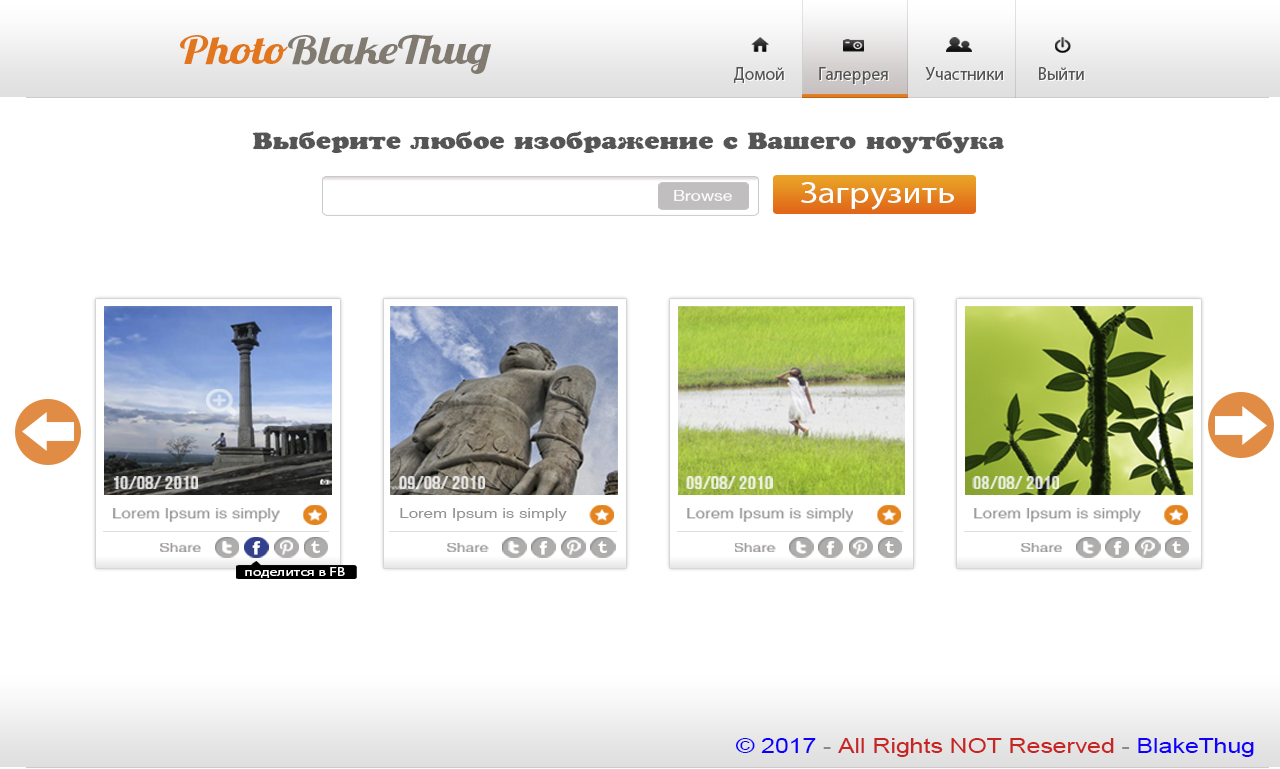
<style>
.page{position:relative;width:1280px;height:769px;background:#ffffff}
.page>*{position:absolute;margin:0}
.t1{font:39.2px "Lobster1.4";color:#817a71;scale:1.21 1}
.t2{font:39.2px "Lobster1.4";color:#e2761c;scale:1.21 1}
.t3{font:18.4px "MyriadPro-Regular";color:#545454;scale:0.95 1}
.t4{font:23.3px "a_CooperBlackRg";color:#565555;scale:1.17 1}
.t5{font:30.6px "MyriadPro-Regular";color:#ffffff;scale:1.17 1}
.t6{font:15px "HelveticaNeueLT-Roman";color:#ffffff;scale:1.17 1}
.t7{font:18.3px "BebasNeue";color:#e0e0df;scale:1.17 1}
.t8{font:18.3px "BebasNeue";color:#e7e6e5;scale:1.17 1}
.t9{font:18.3px "BebasNeue";color:#edf1e0;scale:1.17 1}
.t10{font:18.3px "BebasNeue";color:#eaefdf;scale:1.17 1}
.t11{font:14.4px "HelveticaCE-Regular";color:#979393;scale:1.17 1}
.t12{font:14.4px "HelveticaCE-Regular";color:#959292;scale:1.17 1}
.t13{font:13.5px "HelveticaCE-Regular";color:#9f9898;scale:1.17 1}
.t14{font:12.3px "MyriadPro-Regular";color:#ffffff;scale:1.27 1}
.t15{font:20.3px "ArialMT";color:#c72424;scale:1.22 1}
.t16{font:20.3px "ArialMT";color:#0b00fa;scale:1.22 1}
.t17{font:20.3px "ArialMT";color:#8a8989;scale:1.22 1}
.t18{font:20.3px "ArialMT";color:#1100fa;scale:1.22 1}
</style>
<div class="page">
<p class="t1" style="left:180px;top:34px;width:312px;height:40px"><span class="t2">Photo</span>BlakeThug</p>
<p class="t3" style="left:734px;top:67px;width:350px;height:17px">Домой         Галеррея          Участники         Выйти</p>
<p class="t4" style="left:252px;top:131px;width:752px;height:23px">Выберите любое изображение с Вашего ноутбука</p>
<p class="t5" style="left:801px;top:182px;width:153px;height:28px">Загрузить</p>
<p class="t6" style="left:674px;top:190px;width:58px;height:11px">Browse</p>
<p class="t7" style="left:114px;top:476px;width:84px;height:13px">10/08/ 2010</p>
<p class="t8" style="left:399px;top:476px;width:86px;height:13px">09/08/ 2010</p>
<p class="t9" style="left:686px;top:476px;width:87px;height:13px">09/08/ 2010</p>
<p class="t10" style="left:972px;top:476px;width:87px;height:13px">08/08/ 2010</p>
<p class="t11" style="left:113px;top:508px;width:167px;height:14px">Lorem Ipsum is simply</p>
<p class="t12" style="left:400px;top:508px;width:167px;height:13px">Lorem Ipsum is simply</p>
<p class="t11" style="left:687px;top:508px;width:166px;height:14px">Lorem Ipsum is simply</p>
<p class="t11" style="left:974px;top:508px;width:167px;height:14px">Lorem Ipsum is simply</p>
<p class="t13" style="left:160px;top:543px;width:41px;height:9px">Share</p>
<p class="t13" style="left:447px;top:543px;width:42px;height:9px">Share</p>
<p class="t13" style="left:735px;top:543px;width:41px;height:9px">Share</p>
<p class="t13" style="left:1021px;top:543px;width:41px;height:9px">Share</p>
<p class="t14" style="left:245px;top:567px;width:100px;height:11px">поделится в FB</p>
<p class="t15" style="left:735px;top:738px;width:519px;height:19px"><span class="t16">© 2017</span><span class="t17"> - </span>All Rights NOT Reserved<span class="t17"> - </span><span class="t18">BlakeThug</span></p>
</div>
